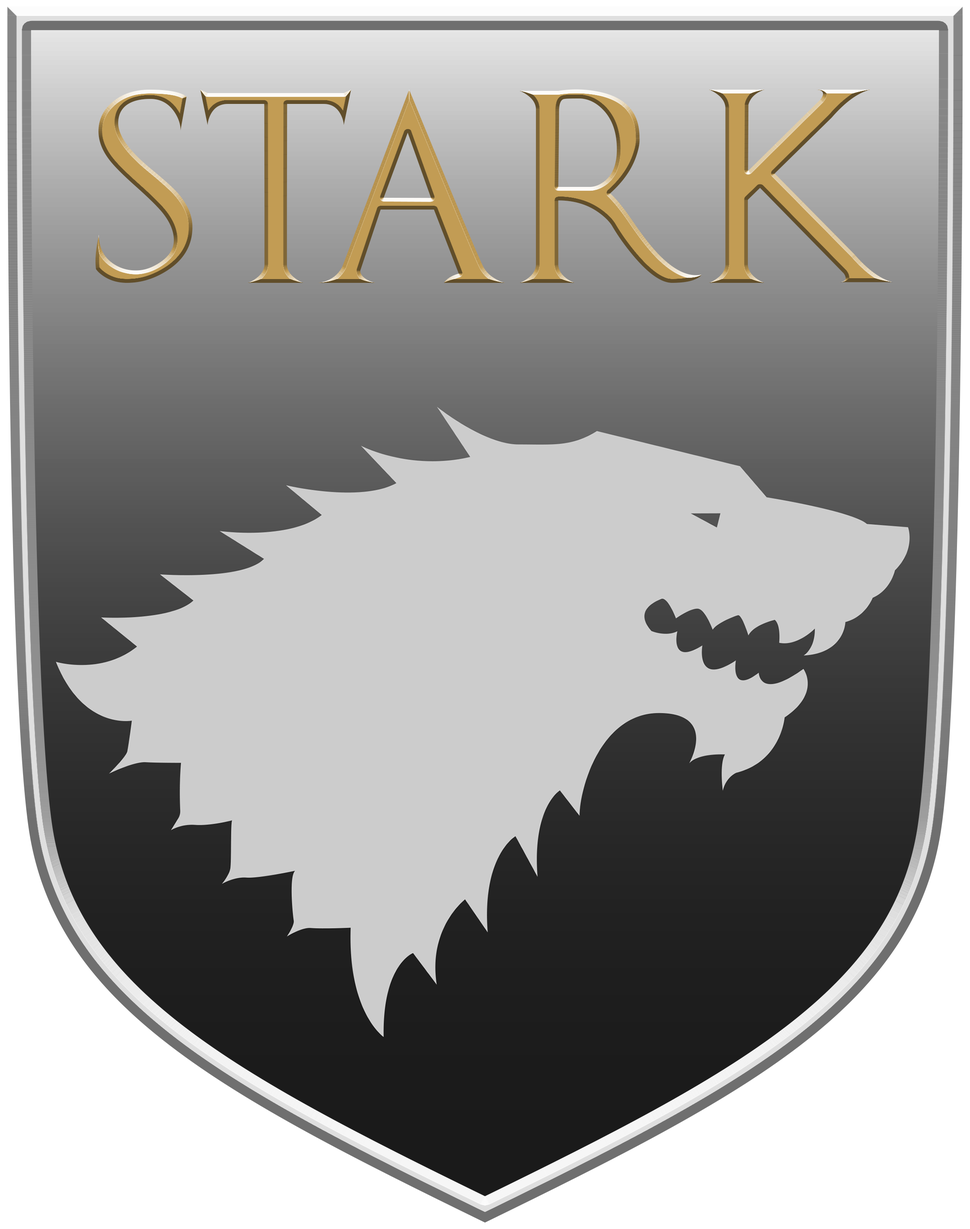
<style>
.page{position:relative;width:970px;height:1229px}
.page>*{position:absolute;margin:0}
.t1{font:193.1px "GameofThrones";color:#c29c54}
</style>
<div class="page">
<p class="t1" style="left:95px;top:89px;width:798px;height:194px">STARK</p>
</div>
